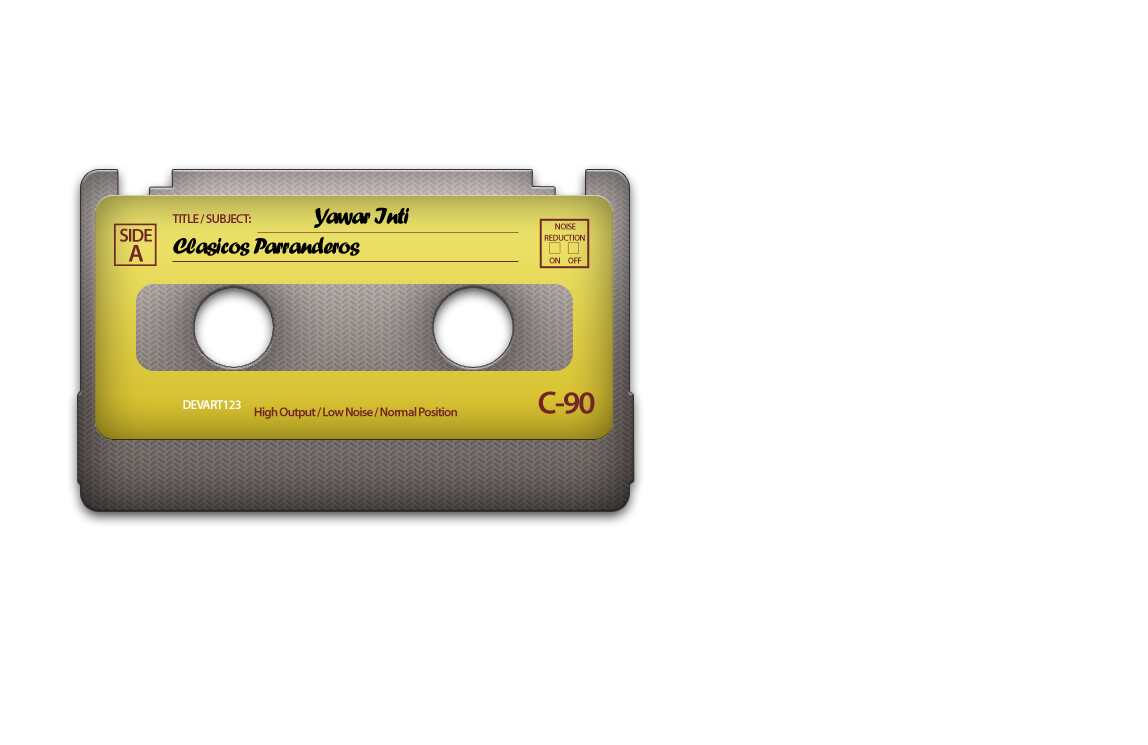
<style>
.page{position:relative;width:1148px;height:745px;background:#ffffff}
.page>*{position:absolute;margin:0}
.t1{font:23.6px "ForteMT";letter-spacing:-0.06em;color:#000000}
.t2{font:12.8px "MyriadPro-Semibold";letter-spacing:-0.06em;color:#732525}
.t3{font:18.6px/20px "MyriadPro-Semibold";letter-spacing:-0.06em;color:#732525}
.t4{font:24.6px/20px "MyriadPro-Semibold";letter-spacing:-0.06em;color:#732525}
.t5{font:8.8px/11.4px "MyriadPro-Semibold";letter-spacing:-0.06em;color:#732525}
.t6{font:12.8px "MyriadPro-Semibold";letter-spacing:-0.06em;color:#ffffff}
.t7{font:32.2px "MyriadPro-Semibold";letter-spacing:-0.06em;color:#732525}
.t8{font:12.9px "MyriadPro-Semibold";letter-spacing:-0.06em;color:#732525}
</style>
<div class="page">
<p class="t1" style="left:314px;top:207px;width:95px;height:21px">Yawar Inti</p>
<p class="t2" style="left:172px;top:214px;width:79px;height:10px">TITLE / SUBJECT:</p>
<p class="t3" style="left:120px;top:228px;width:32px;height:34px;text-align:center">SIDE<br><span class="t4">A</span></p>
<p class="t5" style="left:544px;top:223px;width:41px;height:41px;text-align:center">NOISE<br>REDUCTION <br><br>ON      OFF</p>
<p class="t1" style="left:173px;top:237px;width:187px;height:19px">Clasicos Parranderos</p>
<p class="t6" style="left:183px;top:400px;width:58px;height:9px">DEVART123</p>
<p class="t7" style="left:538px;top:391px;width:57px;height:23px">C-90</p>
<p class="t8" style="left:254px;top:407px;width:203px;height:12px">High Output / Low Noise / Normal Position</p>
</div>
